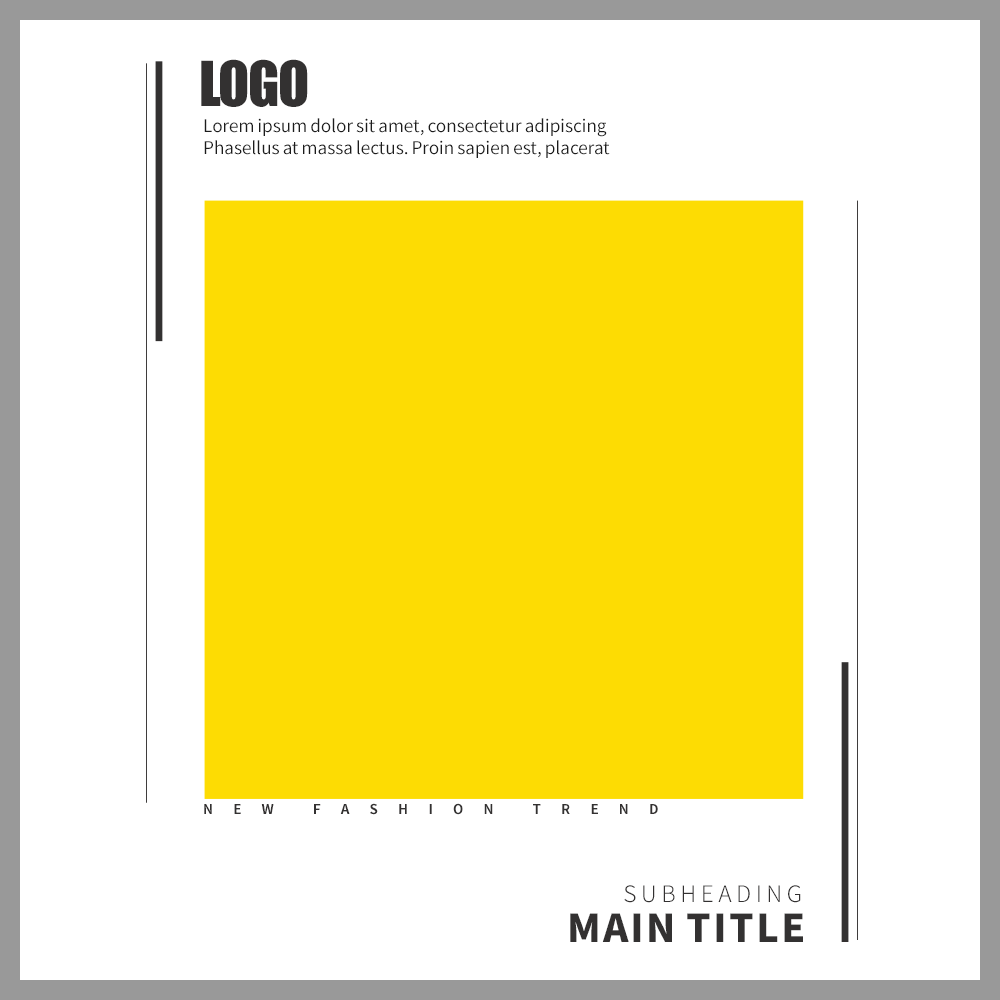
<style>
.page{position:relative;width:1000px;height:1000px;background:#ffffff}
.page>*{position:absolute;margin:0}
.t1{font:57.1px "Impact";letter-spacing:-0.025em;color:#333131}
.t2{font:17.3px/21.1px "SourceHanSansKR-Normal";color:#1c1c1c}
.t3{font:13.4px "SourceHanSansKR-Bold";letter-spacing:1.5em;color:#333131}
.t4{font:22.5px "SourceHanSansKR-Light";letter-spacing:0.2em;color:#333131}
.t5{font:38.4px "SourceHanSansKR-Heavy";letter-spacing:0.055em;color:#333131}
</style>
<div class="page">
<p class="t1" style="left:201px;top:59px;width:107px;height:48px">LOGO</p>
<p class="t2" style="left:204px;top:118px;width:406px;height:40px">Lorem ipsum dolor sit amet, consectetur adipiscing  <br>Phasellus at massa lectus. Proin sapien est, placerat</p>
<p class="t3" style="left:204px;top:803px;width:454px;height:12px">NEW FASHION TREND</p>
<p class="t4" style="left:624px;top:885px;width:177px;height:18px">SUBHEADING</p>
<p class="t5" style="left:570px;top:913px;width:233px;height:29px">MAIN TITLE</p>
</div>
